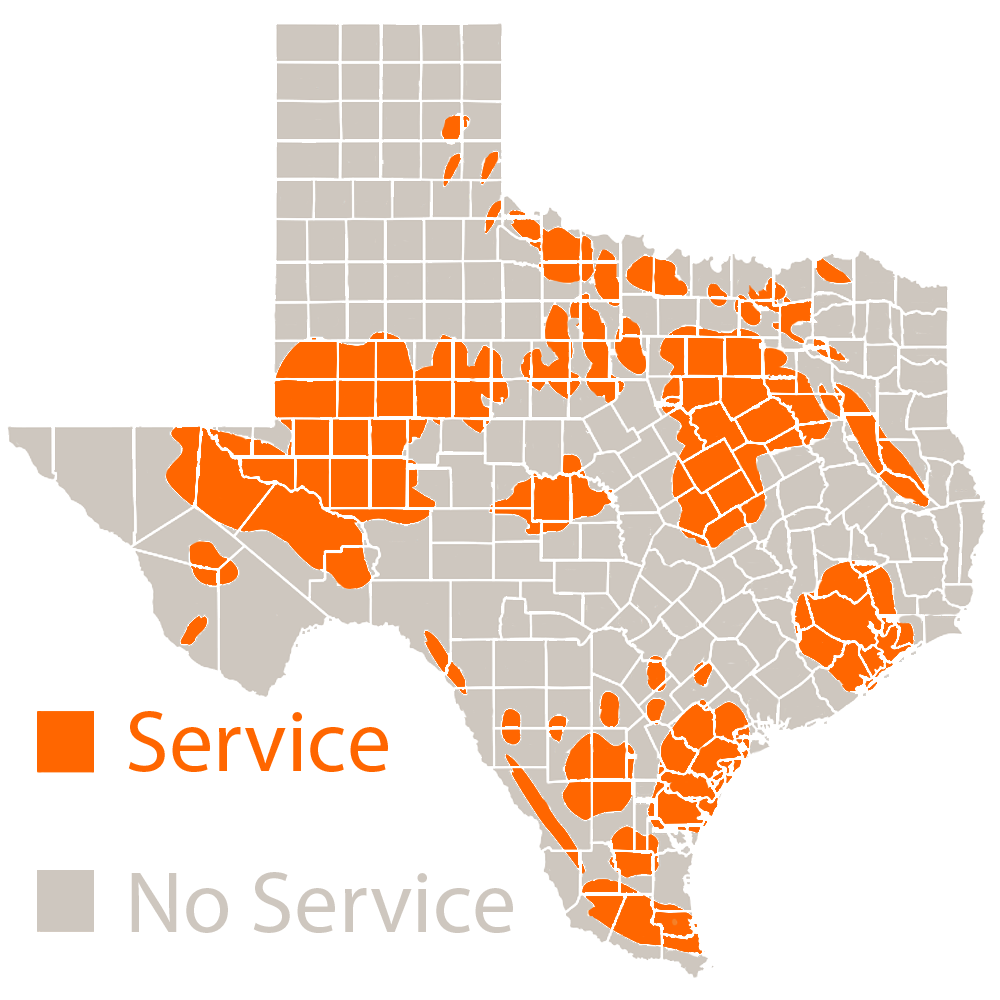
<style>
.page{position:relative;width:1000px;height:1000px;background:#ffffff}
.page>*{position:absolute;margin:0}
.t1{font:88.2px "MyriadPro-Regular";color:#ff6600}
.t2{font:88.2px "MyriadPro-Regular";color:#cec7bf}
</style>
<div class="page">
<p class="t1" style="left:128px;top:711px;width:260px;height:61px">Service</p>
<p class="t2" style="left:131px;top:872px;width:382px;height:61px">No Service</p>
</div>
